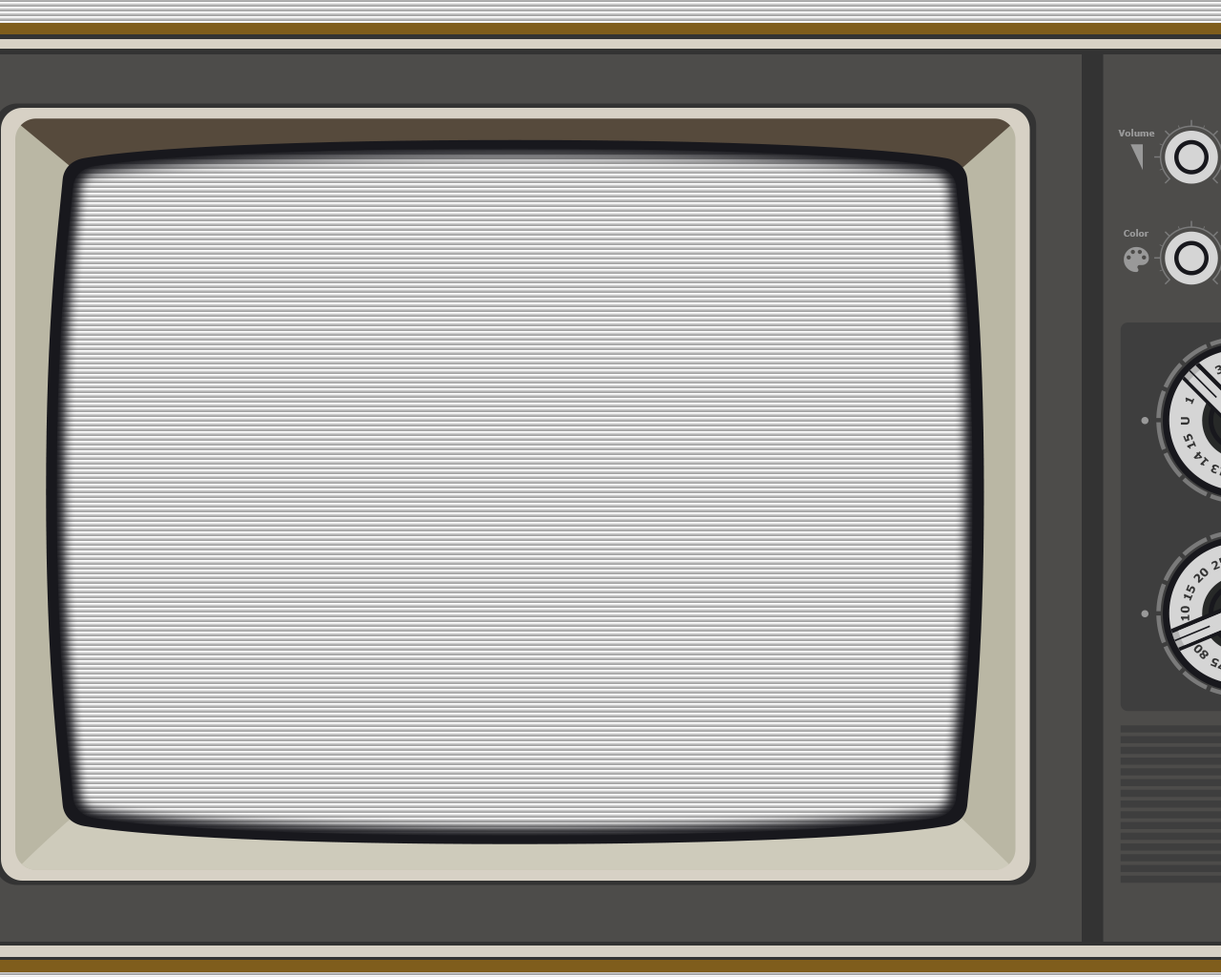
<style>
.page{position:relative;width:1221px;height:977px}
.page>*{position:absolute;margin:0}
.t1{font:8.6px "Verdana-Bold";color:#999999}
.t2{font:11.4px "Verdana-Bold";color:#333333}
</style>
<div class="page">
<p class="t1" style="left:1118px;top:129px;width:37px;height:7px">Volume</p>
<p class="t1" style="left:1124px;top:229px;width:25px;height:8px">Color</p>
<p class="t2" style="left:1185px;top:397px;width:9px;height:7px;rotate:-68deg">1</p>
<p class="t2" style="left:1180px;top:417px;width:10px;height:8px;rotate:-90deg">U</p>
<p class="t2" style="left:1183px;top:433px;width:13px;height:16px;rotate:-112deg">15</p>
<p class="t2" style="left:1193px;top:451px;width:16px;height:15px;rotate:-135deg">14</p>
<p class="t2" style="left:1193px;top:568px;width:15px;height:16px;rotate:-45deg">20</p>
<p class="t2" style="left:1184px;top:584px;width:11px;height:17px;rotate:-68deg">15</p>
<p class="t2" style="left:1180px;top:606px;width:10px;height:15px;rotate:-90deg">10</p>
<p class="t2" style="left:1193px;top:644px;width:15px;height:15px;rotate:-135deg">80</p>
</div>
